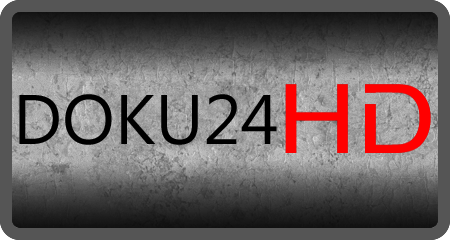
<style>
.page{position:relative;width:450px;height:240px}
.page>*{position:absolute;margin:0}
.t1{font:70px "LaoUI";color:#000000}
</style>
<div class="page">
<p class="t1" style="left:19px;top:94px;width:258px;height:51px">DOKU24</p>
</div>
